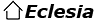
<style>
.page{position:relative;width:96px;height:22px;background:#ffffff}
.page>*{position:absolute;margin:0}
.t1{font:18px "Verdana-BoldItalic";color:#000000}
</style>
<div class="page">
<p class="t1" style="left:25px;top:4px;width:69px;height:14px">Eclesia</p>
</div>
